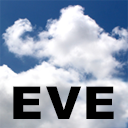
<style>
.page{position:relative;width:128px;height:128px}
.page>*{position:absolute;margin:0}
.t1{font:45.3px "Arial-Black";color:#000000}
</style>
<div class="page">
<p class="t1" style="left:13px;top:86px;width:28px;height:33px">E</p>
<p class="t1" style="left:46px;top:86px;width:36px;height:33px">V</p>
<p class="t1" style="left:86px;top:86px;width:28px;height:33px">E</p>
</div>
